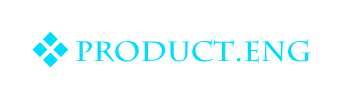
<style>
.page{position:relative;width:360px;height:100px;background:#ffffff}
.page>*{position:absolute;margin:0}
.t1{font:28px "CharlemagneStd-Bold";color:#01ddfe}
</style>
<div class="page">
<p class="t1" style="left:76px;top:39px;width:235px;height:24px">product.eng</p>
</div>
